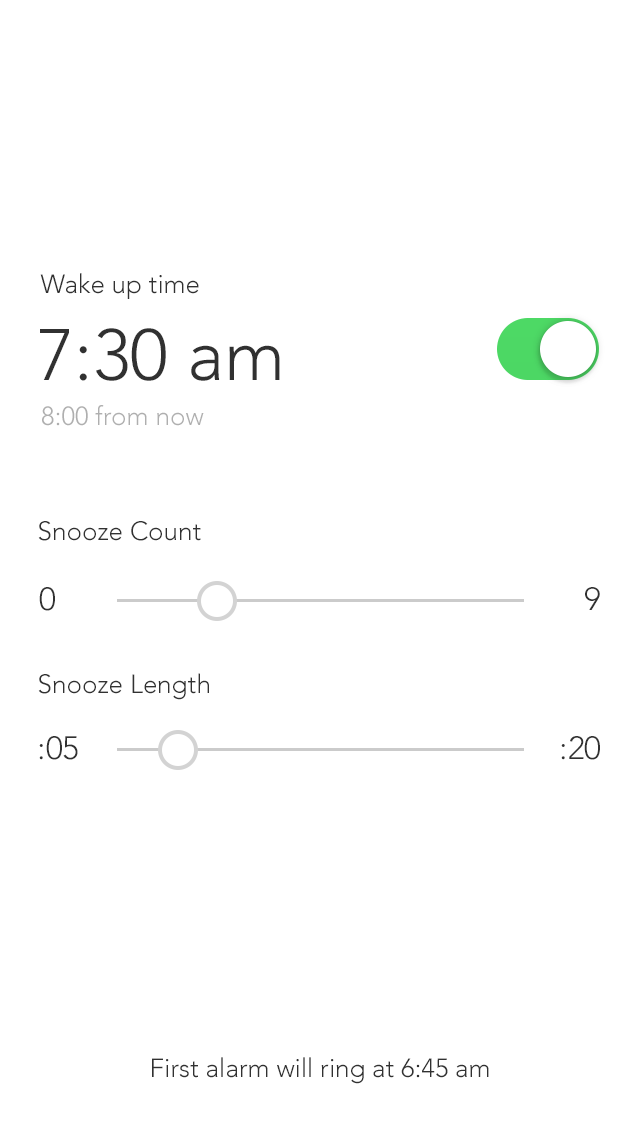
<style>
.page{position:relative;width:640px;height:1136px;background:#ffffff}
.page>*{position:absolute;margin:0}
.t1{font:26px "Avenir-Light";color:#313131}
.t2{font:72px "Avenir-Light";color:#313131}
.t3{font:26px "Avenir-Light";color:#afafaf}
.t4{font:32px "Avenir-Light";color:#313131}
</style>
<div class="page">
<p class="t1" style="left:40px;top:273px;width:159px;height:26px">Wake up time</p>
<p class="t2" style="left:40px;top:328px;width:240px;height:53px">7:30 am</p>
<p class="t3" style="left:42px;top:405px;width:162px;height:21px">8:00 from now</p>
<p class="t1" style="left:38px;top:521px;width:163px;height:20px">Snooze Count</p>
<p class="t4" style="left:39px;top:587px;width:16px;height:24px">0</p>
<p class="t4" style="left:585px;top:587px;width:15px;height:23px">9</p>
<p class="t1" style="left:38px;top:673px;width:171px;height:27px">Snooze Length</p>
<p class="t4" style="left:39px;top:736px;width:39px;height:24px">:05</p>
<p class="t4" style="left:561px;top:736px;width:39px;height:24px">:20</p>
<p class="t1" style="left:152px;top:1057px;width:337px;height:27px">First alarm will ring at 6:45 am</p>
</div>
